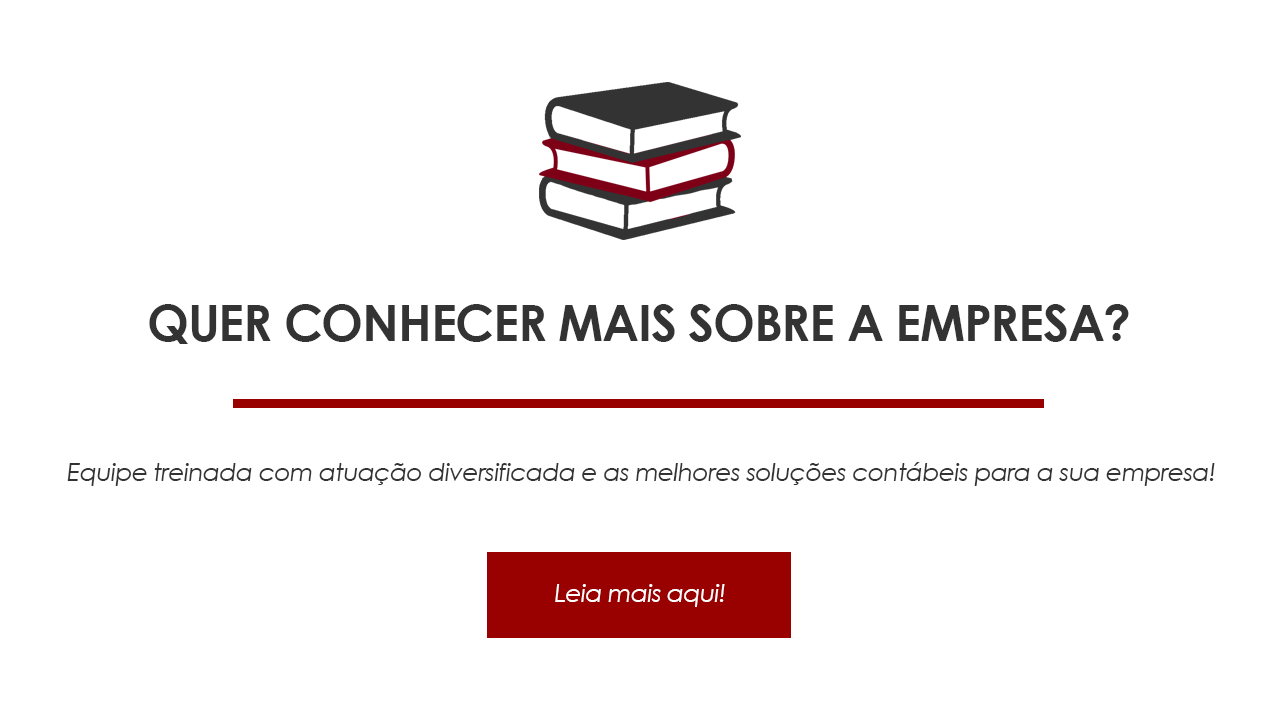
<style>
.page{position:relative;width:1280px;height:720px;background:#ffffff}
.page>*{position:absolute;margin:0}
.t1{font:50px "CenturyGothic-Bold";letter-spacing:-0.025em;color:#333333}
.t2{font:25px "CenturyGothic-Italic";letter-spacing:-0.025em;color:#333333}
.t3{font:25px "CenturyGothic-Italic";letter-spacing:-0.025em;color:#ffffff}
</style>
<div class="page">
<p class="t1" style="left:149px;top:304px;width:980px;height:40px">QUER CONHECER MAIS SOBRE A EMPRESA?</p>
<p class="t2" style="left:67px;top:462px;width:1148px;height:24px">Equipe treinada com atuação diversificada e as melhores soluções contábeis para a sua empresa!</p>
<p class="t3" style="left:555px;top:584px;width:170px;height:23px">Leia mais aqui!</p>
</div>
